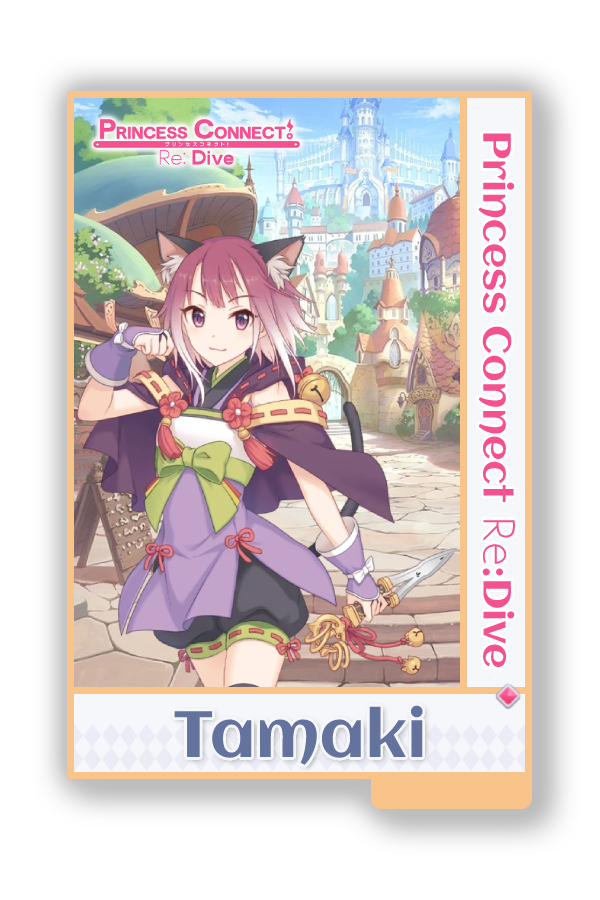
<style>
.page{position:relative;width:600px;height:900px;background:#ffffff}
.page>*{position:absolute;margin:0}
.t1{font:39px "Aclonica-Regular";color:#f55191}
.t2{font:39px "AaarghNormal";color:#f55191}
.t3{font:65px "Aclonica-Regular";color:#64739d}
</style>
<div class="page">
<p class="t1" style="left:478px;top:133px;width:38px;height:534px;rotate:90deg">Princess Connect <span class="t2">Re</span>:Dive</p>
<p class="t3" style="left:174px;top:705px;width:249px;height:60px">Tamaki</p>
</div>
